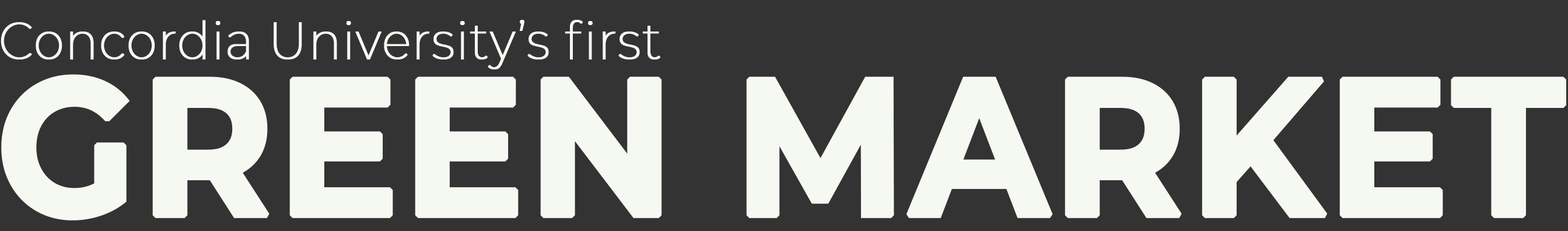
<style>
.page{position:relative;width:1568px;height:231px;background:#333333}
.page>*{position:absolute;margin:0}
.t1{font:52.6px "Montserrat-ExtraLight";color:#f6f8f2;font-weight:bold;scale:0.93 1}
.t2{font:193.9px "Montserrat-Bold";color:#f6f8f2;font-weight:bold;scale:0.93 1}
</style>
<div class="page">
<p class="t1" style="left:1px;top:20px;width:659px;height:49px">Concordia University’s first</p>
<p class="t2" style="left:1px;top:74px;width:1565px;height:146px">GREEN MARKET</p>
</div>
